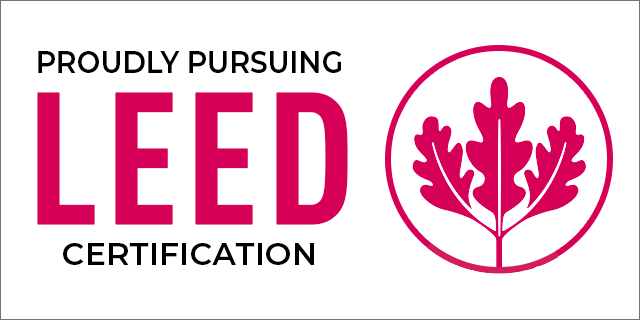
<style>
.page{position:relative;width:640px;height:320px;background:#ffffff}
.page>*{position:absolute;margin:0}
.t1{font:31.2px "Montserrat-SemiBold";color:#000000;text-transform:uppercase;scale:0.9 1}
.t2{font:183.7px "DINPro-CondensedBold";letter-spacing:0.005em;color:#d60058;text-transform:uppercase;font-weight:bold}
.t3{font:31.2px "Montserrat-SemiBold";letter-spacing:0.015em;color:#000000;text-transform:uppercase}
</style>
<div class="page">
<p class="t1" style="left:38px;top:51px;width:304px;height:22px">Proudly Pursuing</p>
<p class="t2" style="left:37px;top:92px;width:311px;height:133px">Leed</p>
<p class="t3" style="left:63px;top:243px;width:251px;height:22px">Certification</p>
</div>
